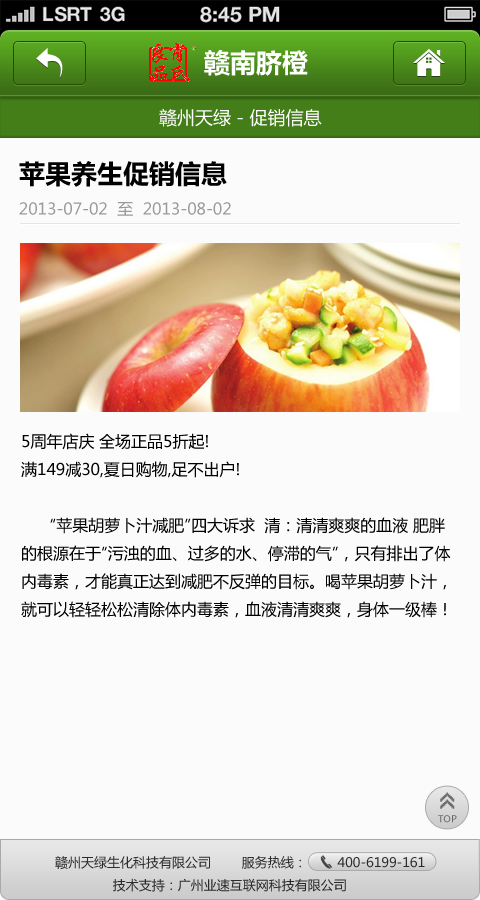
<style>
.page{position:relative;width:480px;height:900px;background:#fbfbfb}
.page>*{position:absolute;margin:0}
.t1{font:26px "MicrosoftYaHeiBold";color:#ffffff}
.t2{font:18px "MicrosoftYaHei";color:#ffffff}
.t3{font:26px "MicrosoftYaHeiBold";color:#000000}
.t4{font:16px "MicrosoftYaHei";color:#999999}
.t5{font:16px "MicrosoftYaHei";color:#000000}
.t6{font:26px "8514oem";letter-spacing:-0.2em;color:#6f6f6f;font-weight:bold}
.t7{font:9.3px "MicrosoftYaHei";color:#686868}
.t8{font:13px "MicrosoftYaHei";color:#2c2c2c}
</style>
<div class="page">
<p class="t1" style="left:204px;top:50px;width:104px;height:26px">赣南脐橙</p>
<p class="t2" style="left:159px;top:108px;width:163px;height:19px">赣州天绿 - 促销信息</p>
<p class="t3" style="left:19px;top:161px;width:208px;height:26px">苹果养生促销信息</p>
<p class="t4" style="left:19px;top:202px;width:212px;height:14px">2013-07-02  至  2013-08-02</p>
<p class="t5" style="left:21px;top:433px;width:430px;height:185px">5周年店庆 全场正品5折起!<br>满149减30,夏日购物,足不出户! <br><br>      “苹果胡萝卜汁减肥”四大诉求  清：清清爽爽的血液 肥胖<br>的根源在于“污浊的血、过多的水、停滞的气”，只有排出了体<br>内毒素，才能真正达到减肥不反弹的目标。喝苹果胡萝卜汁，<br>就可以轻轻松松清除体内毒素，血液清清爽爽，身体一级棒！</p>
<p class="t6" style="left:440px;top:792px;width:15px;height:17px;rotate:-90deg">&gt;&gt;</p>
<p class="t7" style="left:438px;top:815px;width:19px;height:8px">TOP</p>
<p class="t8" style="left:55px;top:856px;width:370px;height:36px">赣州天绿生化科技有限公司        服务热线：        400-6199-161<br>               技术支持：广州业速互联网科技有限公司</p>
</div>
